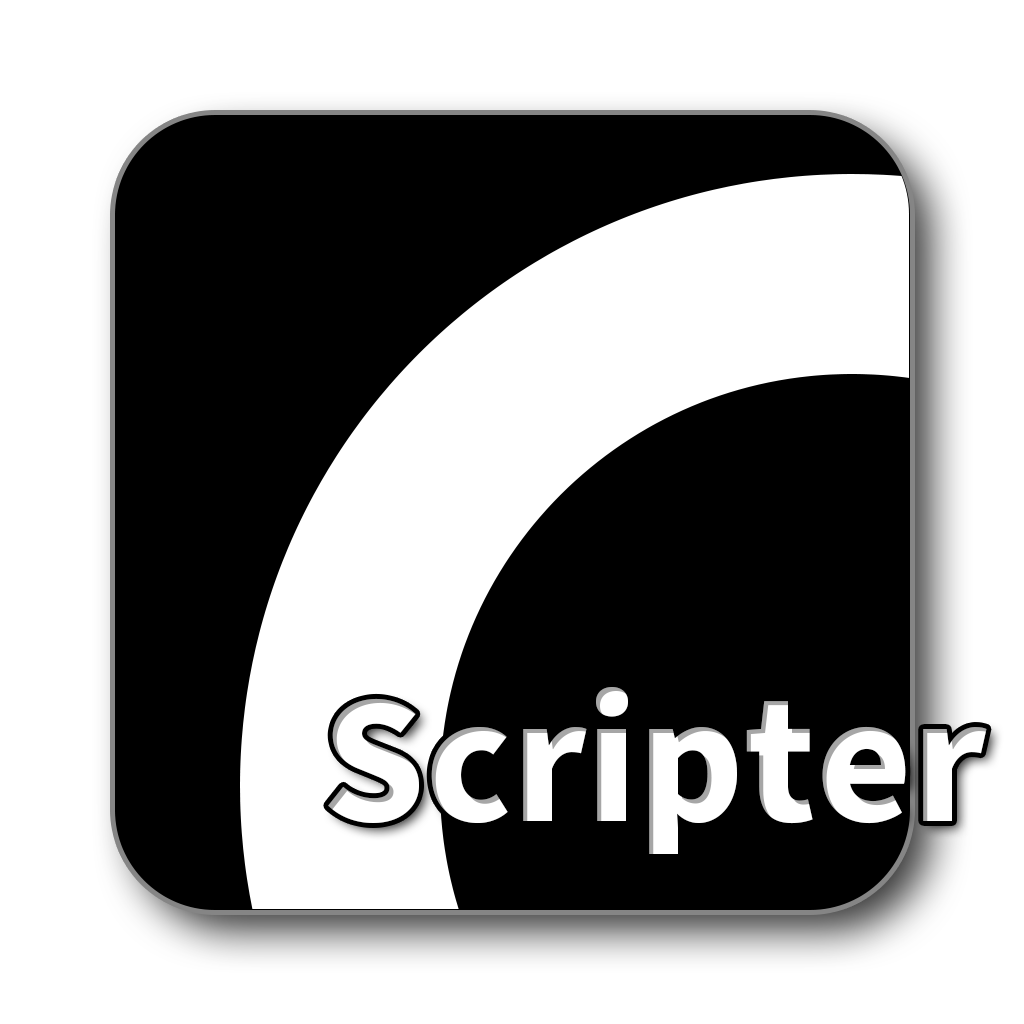
<style>
.page{position:relative;width:1024px;height:1024px;background:#ffffff}
.page>*{position:absolute;margin:0}
.t1{font:161px "SourceHanSansSC-Heavy";color:#ffffff}
</style>
<div class="page">
<p class="t1" style="left:328px;top:687px;width:659px;height:167px">Scripter</p>
</div>
